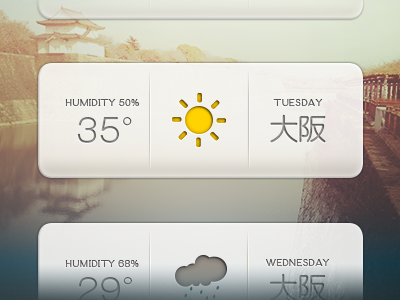
<style>
.page{position:relative;width:400px;height:300px}
.page>*{position:absolute;margin:0}
.t1{font:8.3px "MOGBlock-Regular";color:#5a5957;text-transform:uppercase;font-weight:bold}
.t2{font:8.3px "MOGBlock-Regular";color:#585755;text-transform:uppercase;font-weight:bold}
.t3{font:31.8px "MOGBlock-Regular"}
.t4{font:29.9px "Jun201-regular";letter-spacing:-0.04em}
.t5{font:8.2px "MOGBlock-Regular";color:#5f5f5d;text-transform:uppercase;font-weight:bold}
.t6{font:8.2px "MOGBlock-Regular";color:#666563;text-transform:uppercase;font-weight:bold}
.t7{font:31.4px "MOGBlock-Regular";color:#586266}
.t8{font:29.6px "Jun201-regular";letter-spacing:-0.04em;color:#566265}
</style>
<div class="page">
<p class="t1" style="left:65px;top:99px;width:74px;height:8px">humidity 50%</p>
<p class="t2" style="left:273px;top:99px;width:50px;height:8px">tuesday</p>
<p class="t3" style="left:77px;top:117px;width:55px;height:26px">35°</p>
<p class="t4" style="left:270px;top:114px;width:56px;height:29px">大阪</p>
<p class="t5" style="left:65px;top:260px;width:74px;height:8px">humidity 68%</p>
<p class="t6" style="left:266px;top:259px;width:63px;height:8px">wednesday</p>
<p class="t7" style="left:78px;top:277px;width:54px;height:25px">29°</p>
<p class="t8" style="left:269px;top:273px;width:57px;height:29px">大阪</p>
</div>
